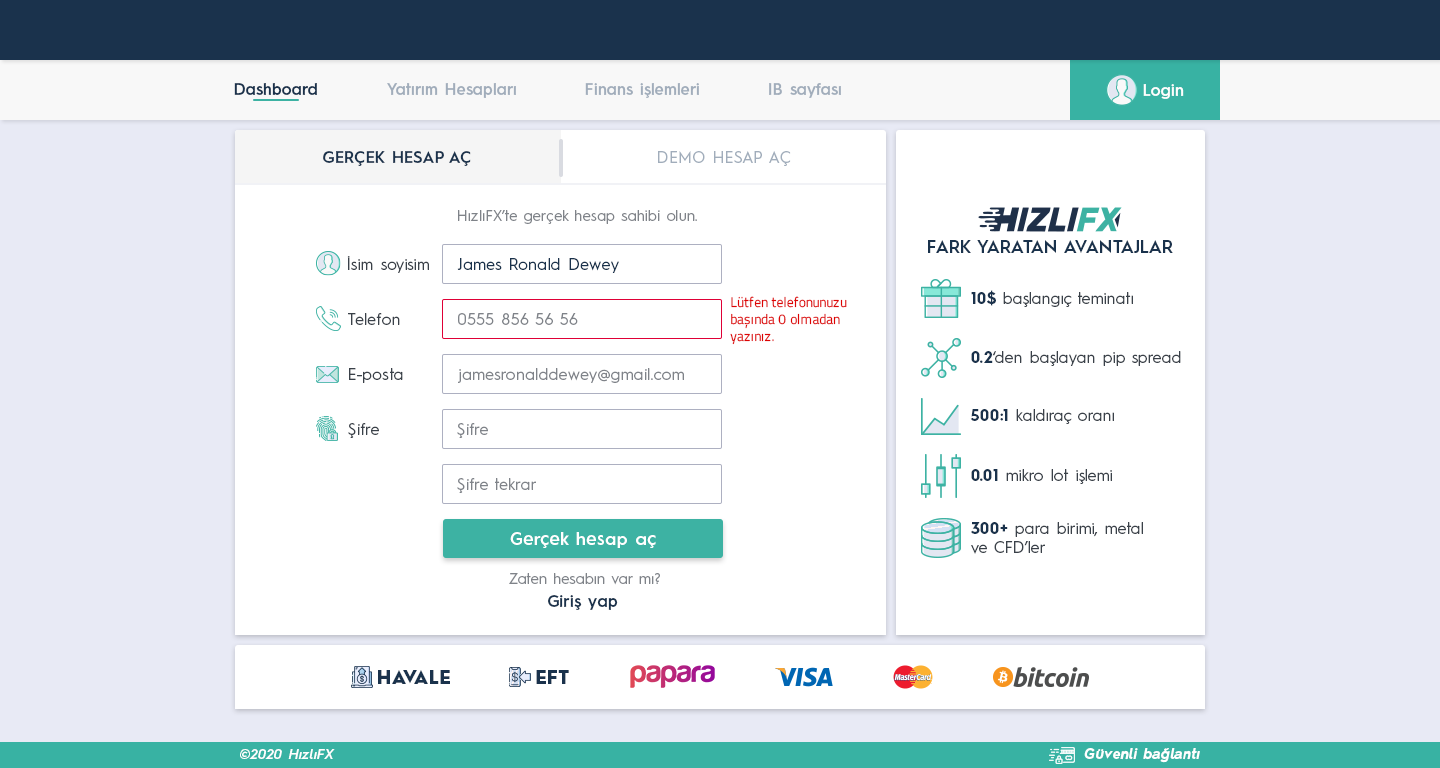
<style>
.page{position:relative;width:1440px;height:768px;background:#ffffff}
.page>*{position:absolute;margin:0}
.t1{font:16px "HurmeGeometricSans3-SemiBold";color:#1a324c}
.t2{font:16px "HurmeGeometricSans3-SemiBold";color:#a1adbb}
.t3{font:16px "HurmeGeometricSans3-SemiBold";color:#fefefe}
.t4{font:16px "HurmeGeometricSans1-SemiBold";letter-spacing:0.01em;color:#1a324c}
.t5{font:16px "HurmeGeometricSans1-Regular";letter-spacing:0.01em;color:#a1adbb}
.t6{font:15px "HurmeGeometricSans1-Regular";letter-spacing:0.01em;color:#7f8389}
.t7{font:18px "HurmeGeometricSans1-SemiBold";color:#1a324c}
.t8{font:16px "HurmeGeometricSans1-Regular";letter-spacing:0.01em;color:#3a4149}
.t9{font:16px "HurmeGeometricSans1-Regular";letter-spacing:0.01em;color:#1a324c}
.t10{font:16px "HurmeGeometricSans1-Regular";color:#3a4149}
.t11{font:16px "HurmeGeometricSans1-Bold";color:#1a324c}
.t12{font:14px "TitilliumWeb-Regular";color:#dd0404}
.t13{font:16px "HurmeGeometricSans1-Regular";letter-spacing:0.01em;color:#7f8389}
.t14{font:18px "HurmeGeometricSans1-SemiBold";letter-spacing:0.025em;color:#ffffff}
.t15{font:16px "HurmeGeometricSans3-SemiBold";letter-spacing:0.025em;color:#1a324c}
.t16{font:18px "HurmeGeometricSans1-Black";letter-spacing:0.025em;color:#1a324c}
.t17{font:14px "HurmeGeometricSans2-SemiBoldObl";letter-spacing:0.025em;color:#ffffff}
.t18{font:14px "HurmeGeometricSans2-BoldObl";letter-spacing:0.025em;color:#ffffff}
</style>
<div class="page">
<p class="t1" style="left:234px;top:83px;width:83px;height:12px">Dashboard</p>
<p class="t2" style="left:387px;top:83px;width:129px;height:15px">Yatırım Hesapları</p>
<p class="t2" style="left:585px;top:83px;width:114px;height:15px">Finans işlemleri</p>
<p class="t2" style="left:769px;top:83px;width:72px;height:15px">IB sayfası</p>
<p class="t3" style="left:1143px;top:84px;width:41px;height:15px">Login</p>
<p class="t4" style="left:323px;top:151px;width:148px;height:15px">GERÇEK HESAP AÇ</p>
<p class="t5" style="left:658px;top:151px;width:133px;height:15px">DEMO HESAP AÇ</p>
<p class="t6" style="left:458px;top:210px;width:239px;height:14px">HızlıFX’te gerçek hesap sahibi olun.</p>
<p class="t7" style="left:928px;top:240px;width:245px;height:13px">FARK YARATAN AVANTAJLAR</p>
<p class="t8" style="left:347px;top:256px;width:82px;height:17px">İsim soyisim</p>
<p class="t9" style="left:457px;top:258px;width:162px;height:15px">James Ronald Dewey</p>
<p class="t10" style="left:971px;top:290px;width:162px;height:17px"><span class="t11">10$</span> başlangıç teminatı</p>
<p class="t12" style="left:730px;top:296px;width:117px;height:49px">Lütfen telefonunuzu<br>başında 0 olmadan<br>yazınız.</p>
<p class="t8" style="left:348px;top:313px;width:52px;height:12px">Telefon</p>
<p class="t13" style="left:458px;top:313px;width:120px;height:12px">0555 856 56 56</p>
<p class="t10" style="left:971px;top:351px;width:210px;height:15px"><span class="t11">0.2</span>‘den başlayan pip spread</p>
<p class="t8" style="left:349px;top:368px;width:54px;height:15px">E-posta</p>
<p class="t13" style="left:458px;top:368px;width:226px;height:15px">jamesronalddewey@gmail.com</p>
<p class="t10" style="left:970px;top:409px;width:144px;height:15px"><span class="t11">500:1</span> kaldıraç oranı</p>
<p class="t8" style="left:348px;top:423px;width:31px;height:15px">Şifre</p>
<p class="t13" style="left:457px;top:423px;width:31px;height:15px">Şifre</p>
<p class="t10" style="left:971px;top:469px;width:141px;height:15px"><span class="t11">0.01</span> mikro lot işlemi</p>
<p class="t13" style="left:457px;top:478px;width:79px;height:15px">Şifre tekrar</p>
<p class="t14" style="left:510px;top:532px;width:146px;height:16px">Gerçek hesap aç</p>
<p class="t10" style="left:971px;top:522px;width:172px;height:32px"><span class="t11">300+</span> para birimi, metal<br>ve CFD’ler</p>
<p class="t6" style="left:509px;top:573px;width:151px;height:12px">Zaten hesabın var mı?</p>
<p class="t15" style="left:548px;top:595px;width:70px;height:15px">Giriş yap</p>
<p class="t16" style="left:378px;top:670px;width:72px;height:14px">HAVALE</p>
<p class="t16" style="left:536px;top:670px;width:33px;height:14px">EFT</p>
<p class="t17" style="left:240px;top:749px;width:95px;height:10px">©2020 HızlıFX</p>
<p class="t18" style="left:1084px;top:748px;width:116px;height:15px">Güvenli bağlantı</p>
</div>
